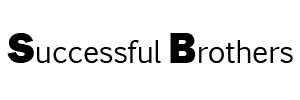
<style>
.page{position:relative;width:300px;height:100px;background:#ffffff}
.page>*{position:absolute;margin:0}
.t1{font:29.5px "EuphemiaCAS";color:#000000}
.t2{font:44.3px "FranklinGothic-Heavy";color:#000000}
</style>
<div class="page">
<p class="t1" style="left:7px;top:33px;width:286px;height:30px"><span class="t2">S</span>uccessful <span class="t2">B</span>rothers</p>
</div>
